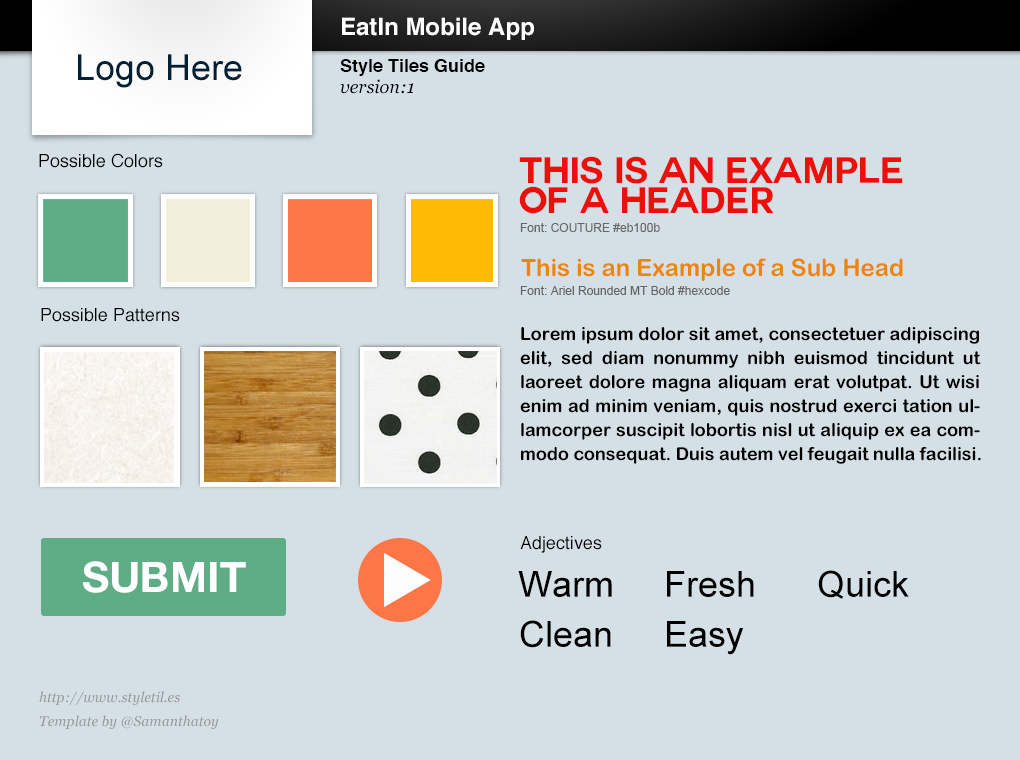
<style>
.page{position:relative;width:1020px;height:760px;background:#d5e0e6}
.page>*{position:absolute;margin:0}
.t1{font:24px "Helvetica-Bold";color:#ffffff}
.t2{font:36px "ArialMT";color:#002035}
.t3{font:18px "Helvetica-Bold";color:#000000}
.t4{font:18px "Georgia-Italic";color:#000000}
.t5{font:18px "Helvetica";color:#000000}
.t6{font:36px/30px "COUTURE-Bold";color:#eb100b}
.t7{font:12px "ArialMT";color:#666666}
.t8{font:24px "ArialRoundedMTBold";color:#ed850b}
.t9{font:18px/24px "ArialRoundedMTBold";color:#000000}
.t10{font:42px "COUTURE-Bold";color:#ffffff}
.t11{font:36px "ArialMT";color:#000000}
.t12{font:14px/24px "Georgia-Italic";color:#999999}
</style>
<div class="page">
<p class="t1" style="left:342px;top:17px;width:192px;height:23px">EatIn Mobile App</p>
<p class="t2" style="left:78px;top:54px;width:164px;height:34px">Logo Here</p>
<p class="t3" style="left:340px;top:59px;width:145px;height:17px">Style Tiles Guide</p>
<p class="t4" style="left:340px;top:79px;width:74px;height:15px">version:1</p>
<p class="t5" style="left:39px;top:153px;width:124px;height:15px">Possible Colors</p>
<p class="t6" style="left:519px;top:156px;width:384px;height:58px">This is an Example <br>of a Header</p>
<p class="t7" style="left:520px;top:223px;width:140px;height:9px">Font: COUTURE #eb100b</p>
<p class="t8" style="left:521px;top:258px;width:382px;height:23px">This is an Example of a Sub Head</p>
<p class="t7" style="left:520px;top:286px;width:210px;height:9px">Font: Ariel Rounded MT Bold #hexcode</p>
<p class="t5" style="left:41px;top:308px;width:139px;height:14px">Possible Patterns</p>
<p class="t9" style="left:520px;top:327px;width:461px;height:137px;text-align:justify">Lorem ipsum dolor sit amet, consectetuer adipiscing elit, sed diam nonummy nibh euismod tincidunt ut laoreet dolore magna aliquam erat volutpat. Ut wisi enim ad minim veniam, quis nostrud exerci tation ullamcorper suscipit lobortis nisl ut aliquip ex ea commodo consequat. Duis autem vel feugait nulla facilisi.</p>
<p class="t5" style="left:520px;top:536px;width:82px;height:17px">Adjectives</p>
<p class="t10" style="left:83px;top:561px;width:163px;height:32px">Submit</p>
<p class="t11" style="left:518px;top:571px;width:94px;height:26px">Warm</p>
<p class="t11" style="left:667px;top:571px;width:87px;height:26px">Fresh</p>
<p class="t11" style="left:818px;top:570px;width:91px;height:29px">Quick</p>
<p class="t11" style="left:520px;top:620px;width:91px;height:28px">Clean</p>
<p class="t11" style="left:667px;top:621px;width:77px;height:34px">Easy</p>
<p class="t12" style="left:39px;top:691px;width:180px;height:38px">http://www.styletil.es<br>Template by @Samanthatoy</p>
</div>
